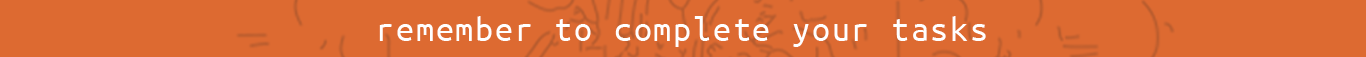
<style>
.page{position:relative;width:1366px;height:57px;background:#dd6a31}
.page>*{position:absolute;margin:0}
.t1{font:36px "UbuntuMono-Regular";letter-spacing:0.05em;color:#ffffff}
</style>
<div class="page">
<p class="t1" style="left:379px;top:16px;width:607px;height:31px">remember to complete your tasks</p>
</div>
